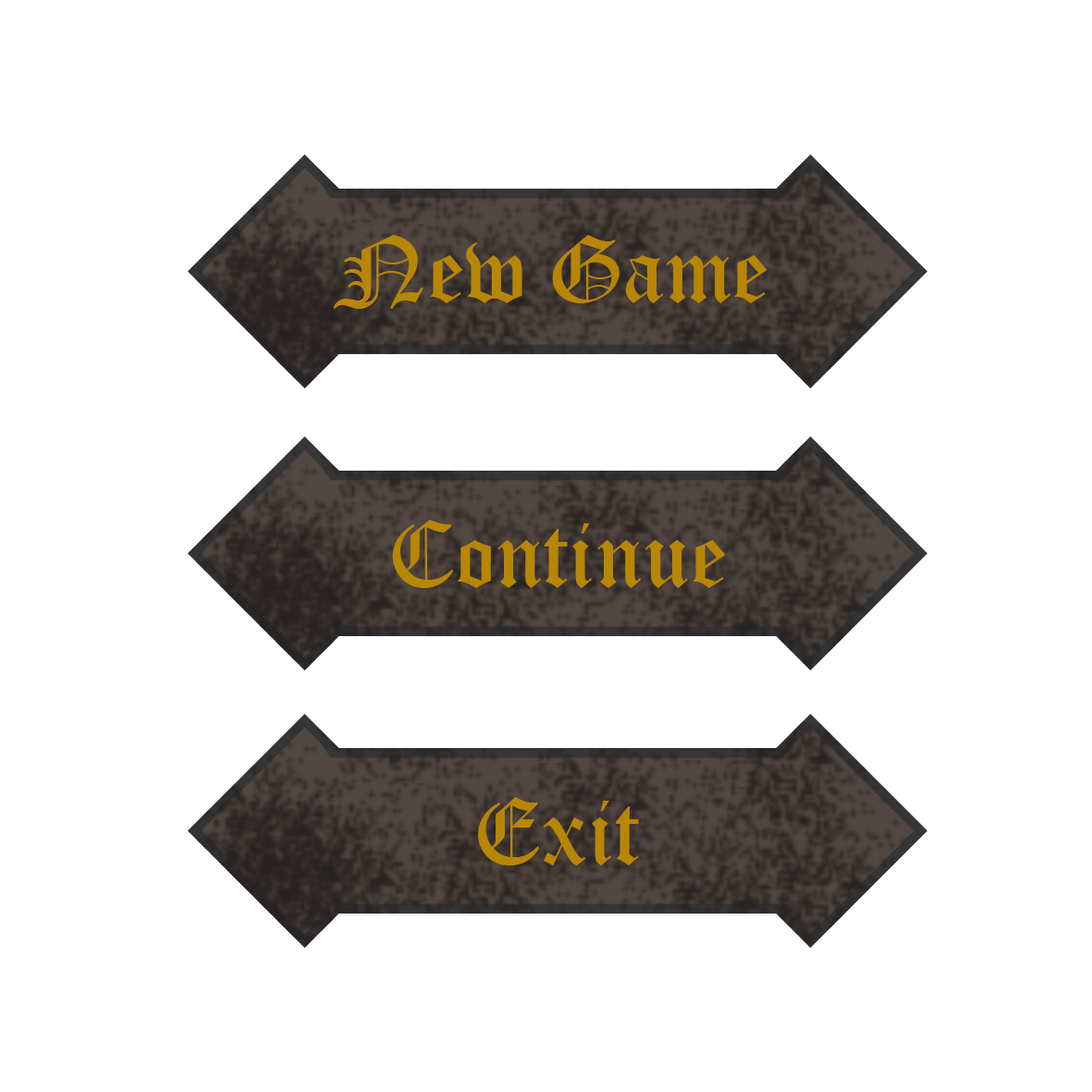
<style>
.page{position:relative;width:1092px;height:1092px;background:#ffffff}
.page>*{position:absolute;margin:0}
.t1{font:92.5px "OldEnglishTextMT";color:#b78604}
</style>
<div class="page">
<p class="t1" style="left:333px;top:235px;width:434px;height:74px">New Game</p>
<p class="t1" style="left:392px;top:520px;width:334px;height:68px">Continue</p>
<p class="t1" style="left:478px;top:797px;width:161px;height:68px">Exit</p>
</div>
